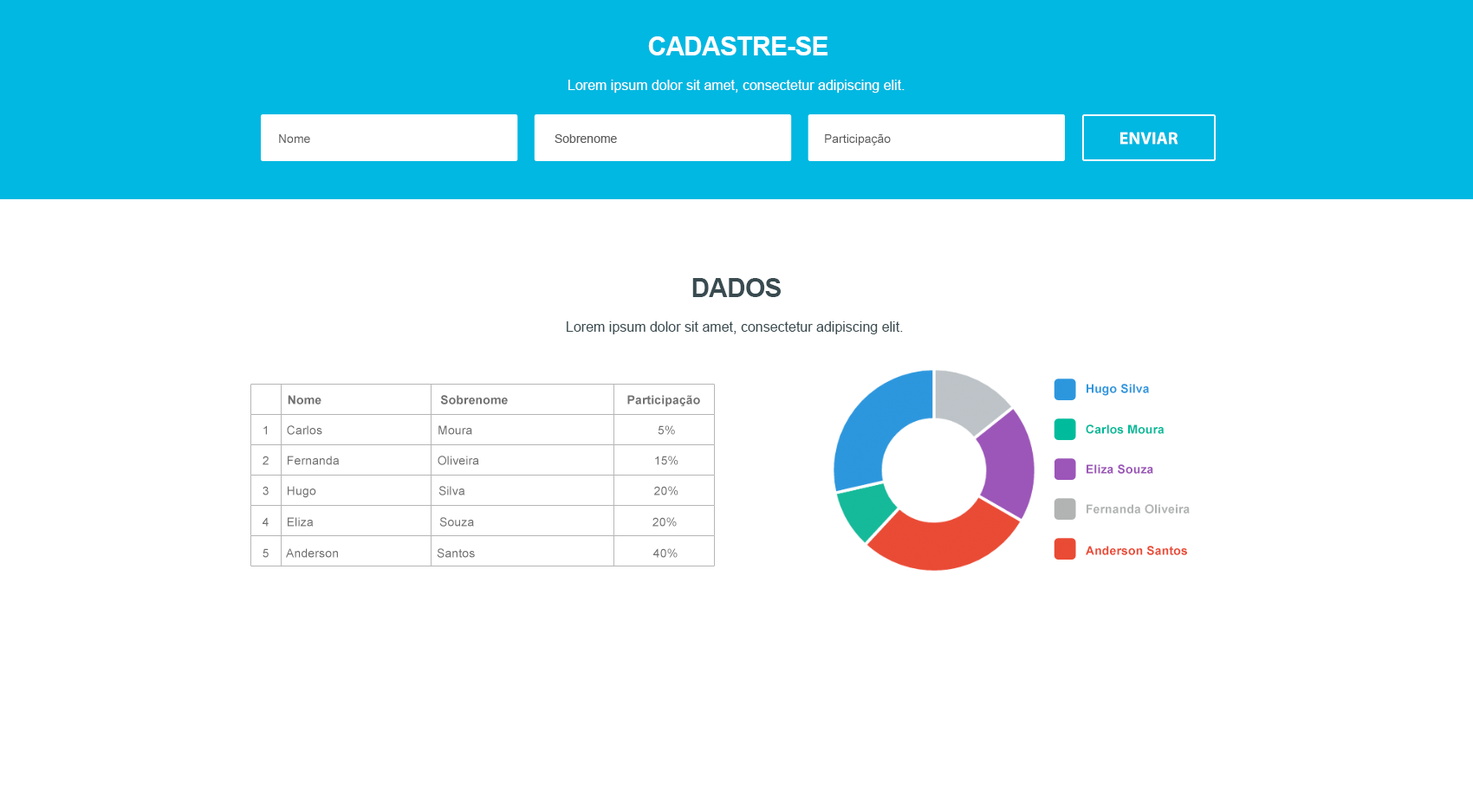
<style>
.page{position:relative;width:1473px;height:809px;background:#ffffff}
.page>*{position:absolute;margin:0}
.t1{font:13.9px/34.7px "ArialMT";color:#ffffff}
.t2{font:26px/34.7px "Arial-BoldMT";letter-spacing:-0.025em;color:#ffffff;text-transform:uppercase}
.t3{font:12.1px "ArialMT";color:#5c5c5c}
.t4{font:17.3px "MyriadPro-Bold";color:#ffffff;text-transform:uppercase}
.t5{font:13.9px/34.7px "ArialMT";color:#394b50}
.t6{font:26px/34.7px "Arial-BoldMT";letter-spacing:-0.025em;color:#394b50;text-transform:uppercase}
.t7{font:12.1px "Arial-BoldMT";letter-spacing:0.01em;color:#2c97dd}
.t8{font:12.1px "Arial-BoldMT";letter-spacing:0.01em;color:#707070}
.t9{font:12.1px "ArialMT";letter-spacing:0.01em;color:#707070}
.t10{font:12.1px "Arial-BoldMT";letter-spacing:0.01em;color:#00bb9b}
.t11{font:12.1px "Arial-BoldMT";letter-spacing:0.01em;color:#9c56b8}
.t12{font:12.1px "Arial-BoldMT";letter-spacing:0.01em;color:#b2b4b4}
.t13{font:12.1px "Arial-BoldMT";letter-spacing:0.01em;color:#ea4b35}
</style>
<div class="page">
<p class="t1" style="left:568px;top:36px;width:337px;height:57px;text-align:center"><span class="t2">Cadastre-se<br></span>Lorem ipsum dolor sit amet, consectetur adipiscing elit.</p>
<p class="t3" style="left:279px;top:134px;width:31px;height:9px">Nome</p>
<p class="t3" style="left:555px;top:134px;width:62px;height:9px">Sobrenome</p>
<p class="t3" style="left:825px;top:133px;width:66px;height:13px">Participação</p>
<p class="t4" style="left:1121px;top:132px;width:58px;height:13px">Enviar</p>
<p class="t5" style="left:567px;top:278px;width:336px;height:57px;text-align:center"><span class="t6">Dados<br></span>Lorem ipsum dolor sit amet, consectetur adipiscing elit.</p>
<p class="t7" style="left:1087px;top:384px;width:62px;height:12px">Hugo Silva</p>
<p class="t8" style="left:288px;top:395px;width:412px;height:12px">Nome                                  Sobrenome                                  Participação</p>
<p class="t9" style="left:263px;top:426px;width:412px;height:9px">1     Carlos                                 Moura                                                     5%</p>
<p class="t10" style="left:1086px;top:425px;width:79px;height:9px">Carlos Moura</p>
<p class="t9" style="left:263px;top:456px;width:416px;height:9px">2     Fernanda                            Oliveira                                                  15%</p>
<p class="t11" style="left:1087px;top:464px;width:66px;height:10px">Eliza Souza</p>
<p class="t9" style="left:263px;top:486px;width:416px;height:12px">3     Hugo                                   Silva                                                      20%</p>
<p class="t12" style="left:1087px;top:504px;width:103px;height:10px">Fernanda Oliveira</p>
<p class="t9" style="left:263px;top:517px;width:414px;height:10px">4     Eliza                                    Souza                                                   20%</p>
<p class="t13" style="left:1086px;top:546px;width:101px;height:9px">Anderson Santos</p>
<p class="t9" style="left:263px;top:549px;width:415px;height:9px">5     Anderson                            Santos                                                   40%</p>
</div>
